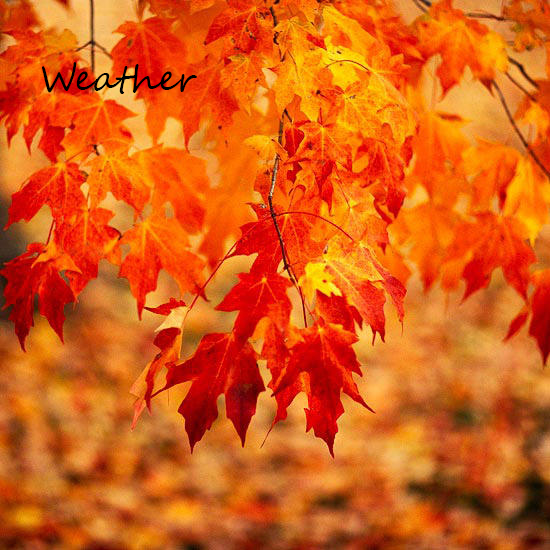
<style>
.page{position:relative;width:550px;height:550px}
.page>*{position:absolute;margin:0}
.t1{font:36px "SegoeScript";color:#000000}
</style>
<div class="page">
<p class="t1" style="left:42px;top:62px;width:155px;height:32px">Weather</p>
</div>
